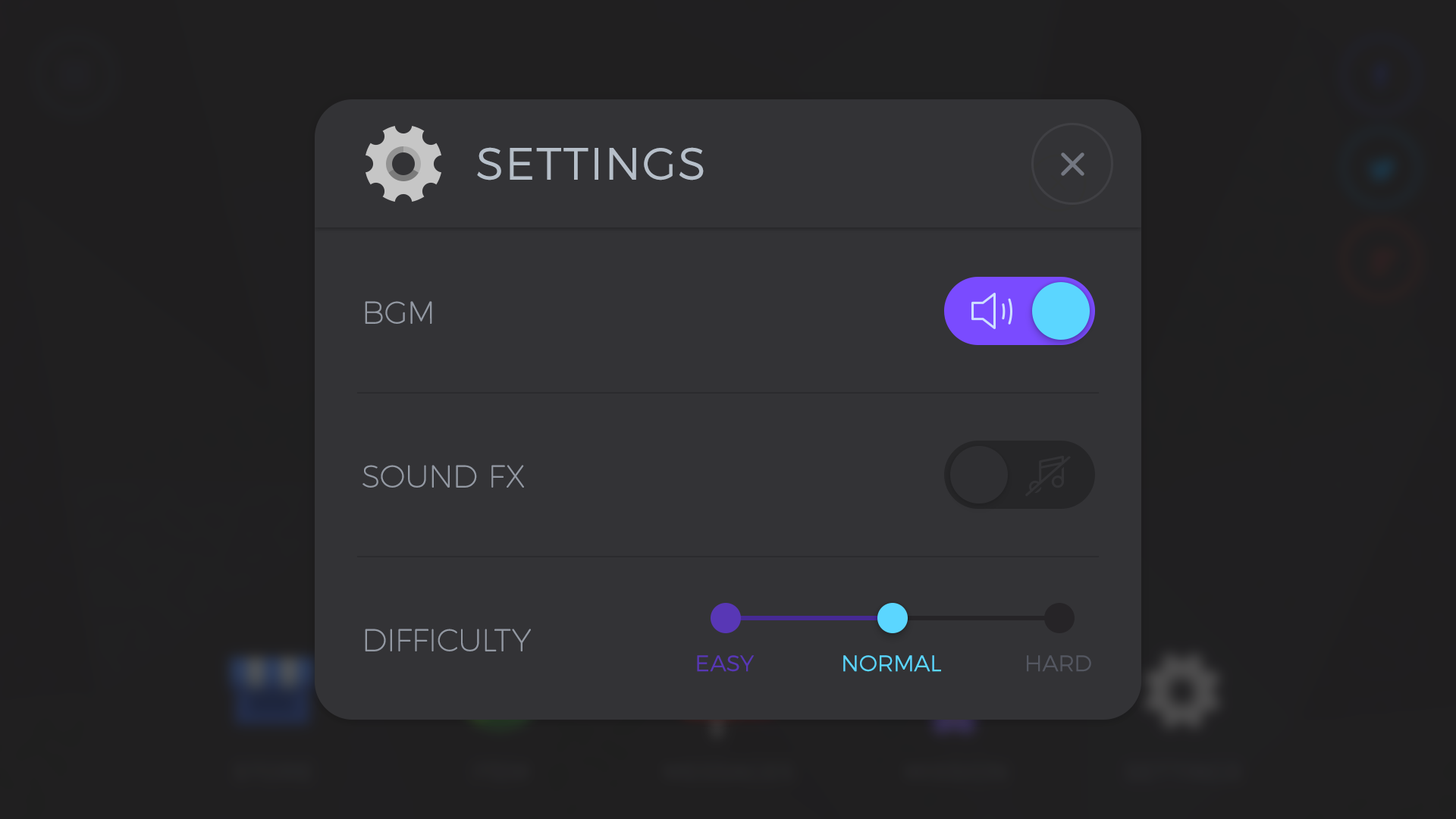
<style>
.page{position:relative;width:1456px;height:819px;background:#333336}
.page>*{position:absolute;margin:0}
.t1{font:45.5px "Montserrat-Light";letter-spacing:0.03em;color:#b6bfc9;text-transform:uppercase}
.t2{font:30.3px/163.8px "Montserrat-Hairline";color:#9399a3;text-transform:uppercase;font-weight:bold}
.t3{font:22.7px "Montserrat-Light";color:#5837b5;text-transform:uppercase}
.t4{font:22.7px "Montserrat-Light";color:#5bd6ff;text-transform:uppercase}
.t5{font:22.7px "Montserrat-Light";color:#545761;text-transform:uppercase}
</style>
<div class="page">
<p class="t1" style="left:477px;top:147px;width:227px;height:33px">SETTINGS</p>
<p class="t2" style="left:362px;top:301px;width:169px;height:350px">Bgm<br>Sound Fx<br>Difficulty</p>
<p class="t3" style="left:697px;top:655px;width:58px;height:17px">Easy</p>
<p class="t4" style="left:843px;top:655px;width:98px;height:17px">Normal</p>
<p class="t5" style="left:1027px;top:655px;width:64px;height:17px">hard</p>
</div>
